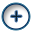
<style>
.page{position:relative;width:32px;height:32px;background:#ffffff}
.page>*{position:absolute;margin:0}
.t1{font:28px "GiddyupStd";color:#133046}
</style>
<div class="page">
<p class="t1" style="left:11px;top:11px;width:11px;height:11px">+</p>
</div>
